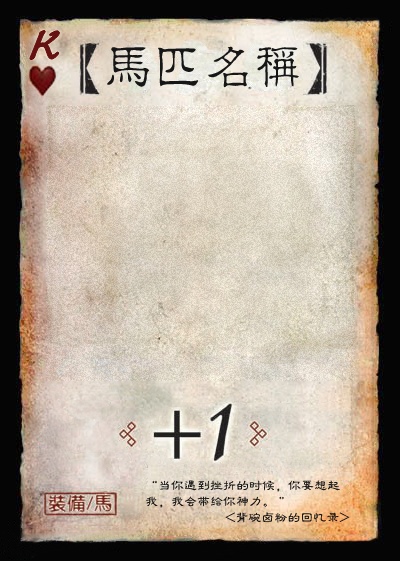
<style>
.page{position:relative;width:400px;height:561px}
.page>*{position:absolute;margin:0}
.t1{font:50px "Jxixinkai";color:#661213;font-weight:bold;font-style:italic}
.t2{font:50px "¾­µä·±½ÇÁ¥ Regular";color:#161616}
.t3{font:13px "FZLBJW--GB1-0";color:#161616}
</style>
<div class="page">
<p class="t1" style="left:30px;top:30px;width:30px;height:30px">K</p>
<p class="t2" style="left:107px;top:46px;width:192px;height:42px">马匹名称</p>
<p class="t3" style="left:152px;top:480px;width:188px;height:12px">“当你遇到挫折的时候，你要想起</p>
<p class="t3" style="left:146px;top:496px;width:138px;height:12px">我，我会带给你神力。 ”</p>
<p class="t3" style="left:225px;top:512px;width:125px;height:11px">&lt;背碗卤粉的回忆录&gt;</p>
</div>
